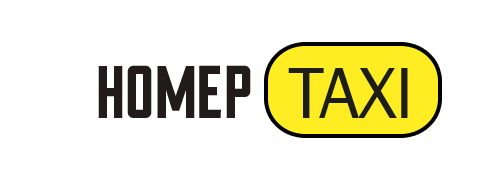
<style>
.page{position:relative;width:489px;height:178px;background:#ffffff}
.page>*{position:absolute;margin:0}
.t1{font:91.7px "AADuke-Fill";letter-spacing:-0.015em;color:#211b1b}
.t2{font:75px "FranklinGothic-Book";letter-spacing:-0.015em;color:#211b1b}
</style>
<div class="page">
<p class="t1" style="left:98px;top:65px;width:153px;height:53px">номер</p>
<p class="t2" style="left:288px;top:68px;width:120px;height:50px">TAXI</p>
</div>
